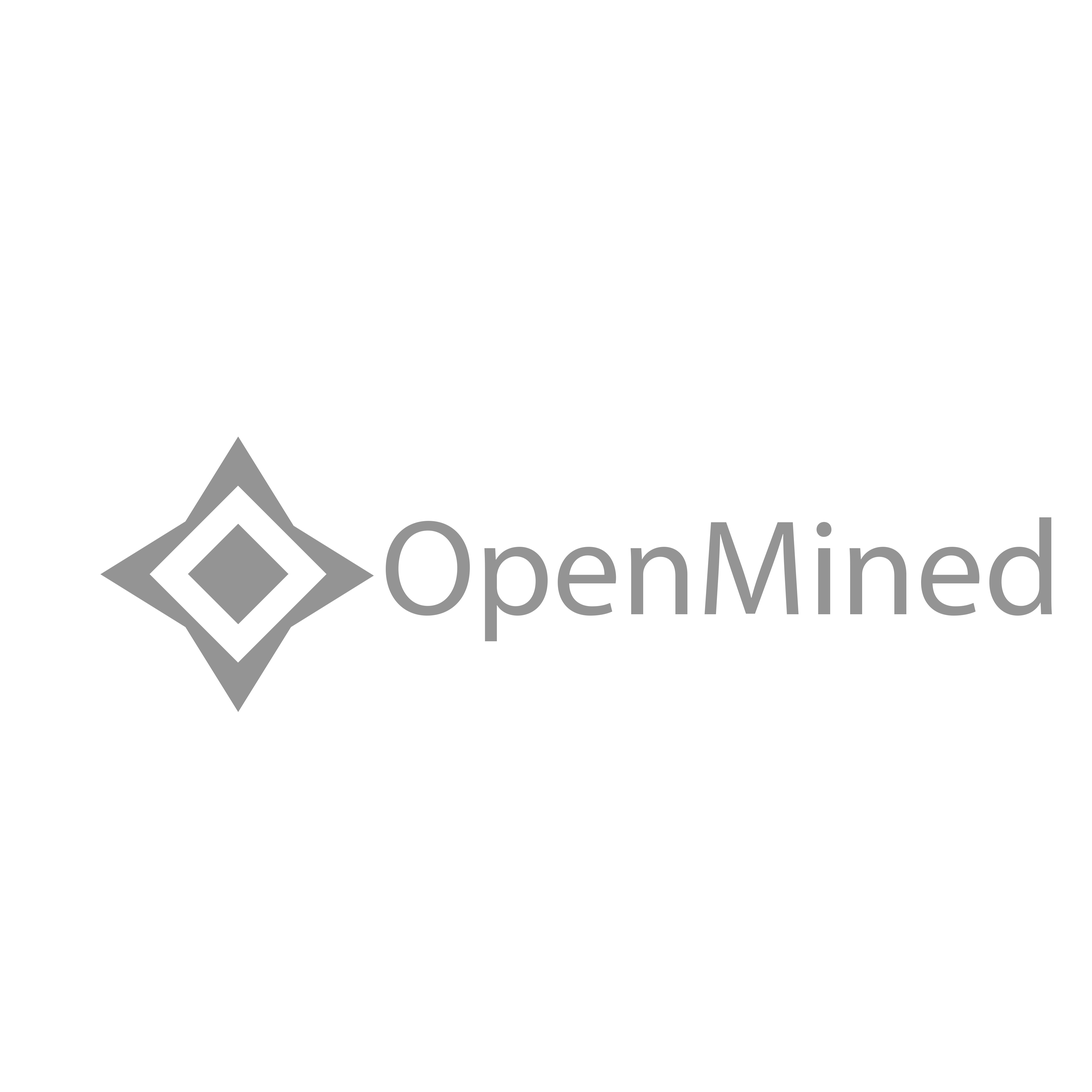
<style>
.page{position:relative;width:1092px;height:1092px;background:#ffffff}
.page>*{position:absolute;margin:0}
.t1{font:136.5px "MyriadPro-Regular";color:#949494}
</style>
<div class="page">
<p class="t1" style="left:386px;top:517px;width:666px;height:124px">OpenMined</p>
</div>
